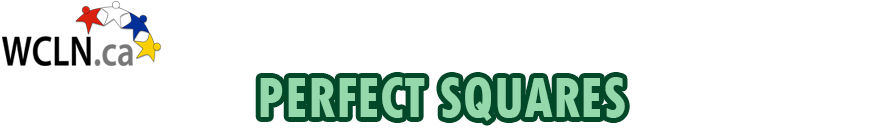
<style>
.page{position:relative;width:880px;height:138px;background:#ffffff}
.page>*{position:absolute;margin:0}
.t1{font:60px "TwCenMT-CondensedExtraBold";letter-spacing:0.005em;color:#94d8ac;scale:0.9 1}
</style>
<div class="page">
<p class="t1" style="left:260px;top:77px;width:365px;height:44px">PERFECT SQUARES</p>
</div>
